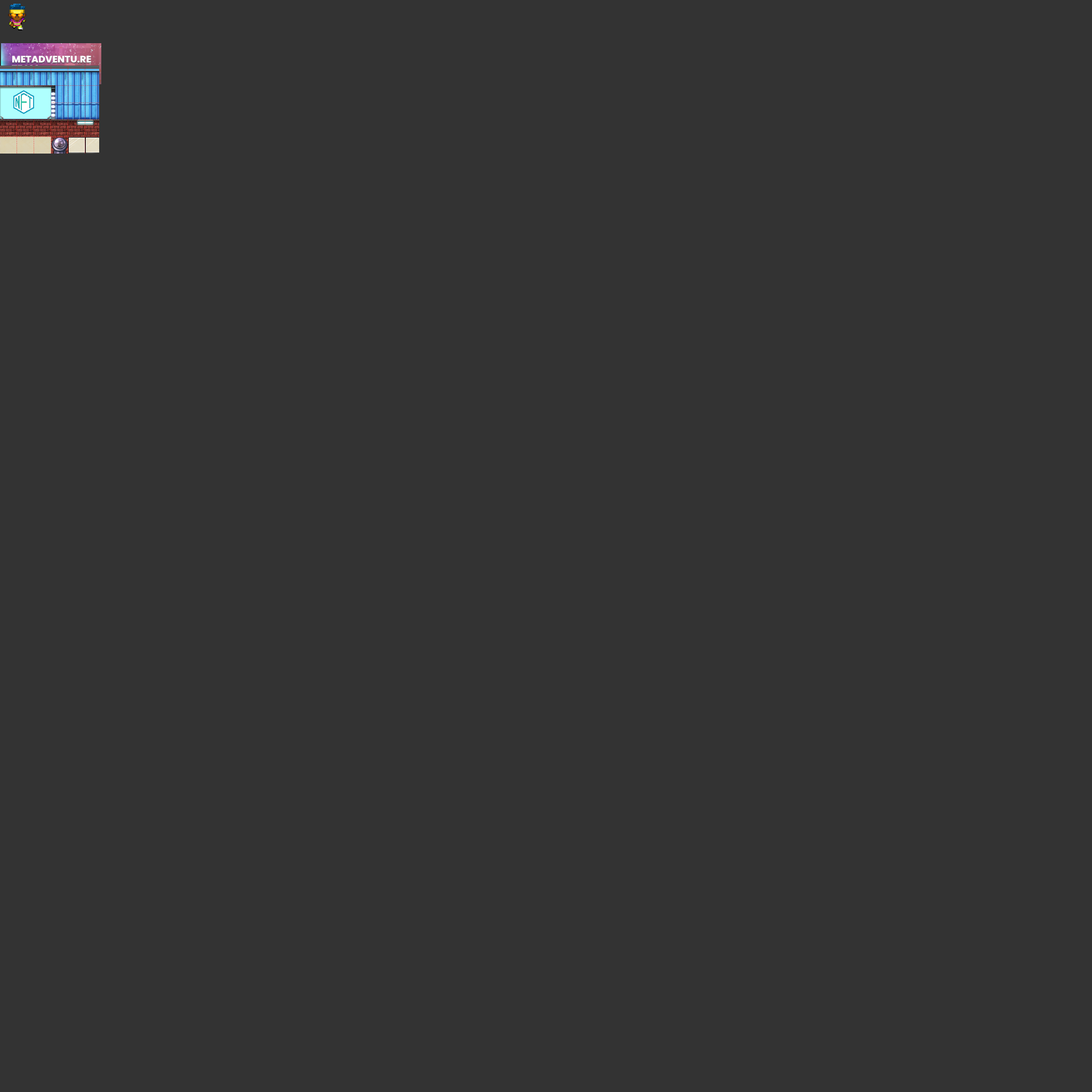
<style>
.page{position:relative;width:1092px;height:1092px;background:#333333}
.page>*{position:absolute;margin:0}
.t1{font:9.4px/9.5px "Poppins-ExtraBold";color:#ffffff;text-transform:uppercase}
</style>
<div class="page">
<p class="t1" style="left:12px;top:55px;width:79px;height:17px">Metadventu.re<br>TEAM</p>
</div>
